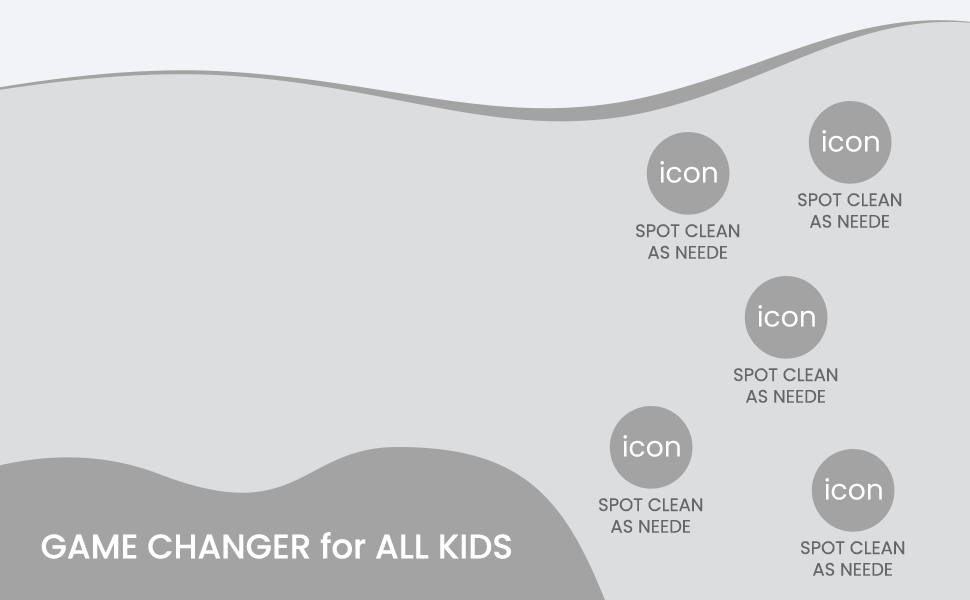
<style>
.page{position:relative;width:970px;height:600px;background:#dcdddf}
.page>*{position:absolute;margin:0}
.t1{font:28.1px "Poppins-Regular";color:#ffffff}
.t2{font:18px "Poppins-Regular";color:#666666}
.t3{font:34px "Poppins-Medium";color:#ffffff}
</style>
<div class="page">
<p class="t1" style="left:822px;top:130px;width:57px;height:22px">icon</p>
<p class="t1" style="left:660px;top:161px;width:57px;height:22px">icon</p>
<p class="t2" style="left:798px;top:193px;width:104px;height:35px;text-align:center">SPOT CLEAN<br>AS NEEDE</p>
<p class="t2" style="left:636px;top:224px;width:104px;height:35px;text-align:center">SPOT CLEAN<br>AS NEEDE</p>
<p class="t1" style="left:758px;top:305px;width:57px;height:22px">icon</p>
<p class="t2" style="left:734px;top:368px;width:104px;height:35px;text-align:center">SPOT CLEAN<br>AS NEEDE</p>
<p class="t1" style="left:623px;top:435px;width:57px;height:22px">icon</p>
<p class="t1" style="left:825px;top:478px;width:57px;height:22px">icon</p>
<p class="t2" style="left:599px;top:498px;width:104px;height:35px;text-align:center">SPOT CLEAN<br>AS NEEDE</p>
<p class="t3" style="left:41px;top:532px;width:470px;height:27px">GAME CHANGER for ALL KIDS</p>
<p class="t2" style="left:801px;top:541px;width:104px;height:35px;text-align:center">SPOT CLEAN<br>AS NEEDE</p>
</div>
